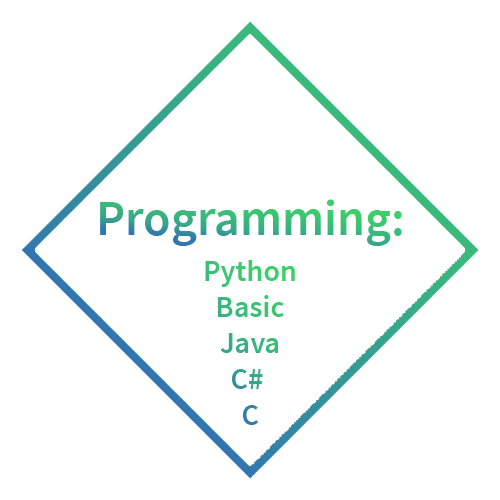
<style>
.page{position:relative;width:500px;height:500px;background:#ffffff}
.page>*{position:absolute;margin:0}
.t1{font:50.3px "SourceSansPro-SemiBold";color:#39b57e}
.t2{font:30px "SourceSansPro-SemiBold";color:#3abc78}
</style>
<div class="page">
<p class="t1" style="left:100px;top:199px;width:302px;height:47px">Programming:</p>
<p class="t2" style="left:205px;top:260px;width:90px;height:165px;text-align:center">Python<br>Basic<br>Java<br>C# <br>C</p>
</div>
